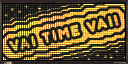
<style>
.page{position:relative;width:128px;height:64px}
.page>*{position:absolute;margin:0}
.t1{font:18px "Junegull";letter-spacing:0.1em;text-transform:uppercase}
</style>
<div class="page">
<p class="t1" style="left:9px;top:15px;width:110px;height:36px;rotate:-14deg">vai time vai!</p>
</div>
